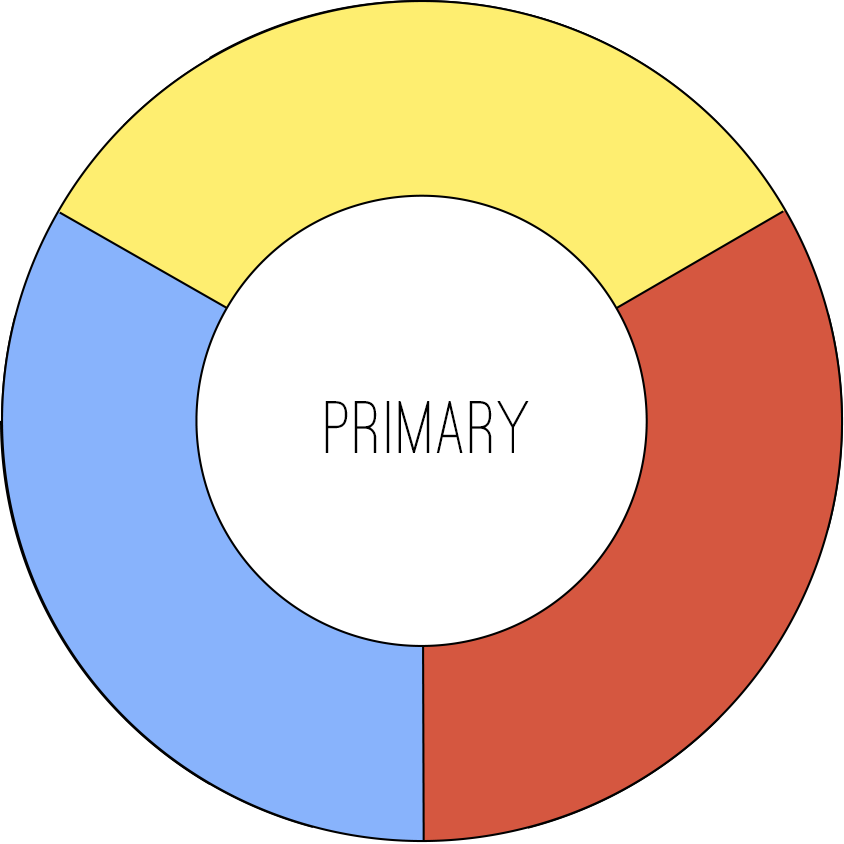
<style>
.page{position:relative;width:844px;height:844px;background:#ffffff}
.page>*{position:absolute;margin:0}
.t1{font:77.1px "OstrichSans-Medium";letter-spacing:0.03em;color:#000000}
</style>
<div class="page">
<p class="t1" style="left:325px;top:401px;width:204px;height:52px">primary</p>
</div>
